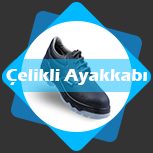
<style>
.page{position:relative;width:153px;height:153px;background:#333333}
.page>*{position:absolute;margin:0}
.t1{font:17.5px "ErasITC-Bold";color:#ffffff}
</style>
<div class="page">
<p class="t1" style="left:6px;top:69px;width:141px;height:16px">Çelikli Ayakkabı</p>
</div>
